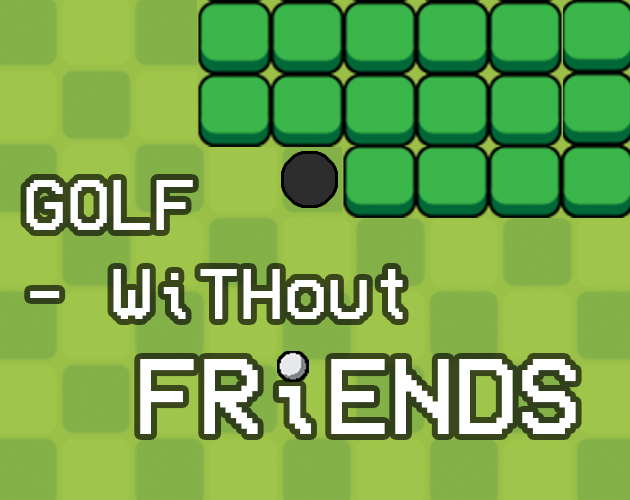
<style>
.page{position:relative;width:630px;height:500px}
.page>*{position:absolute;margin:0}
.t1{font:74.1px "VCROSDMono";color:#ffffff}
.t2{font:108.6px "VCROSDMono";color:#ffffff}
</style>
<div class="page">
<p class="t1" style="left:26px;top:180px;width:377px;height:139px">GOLF <br>- WiTHout</p>
<p class="t2" style="left:140px;top:359px;width:436px;height:75px">FRiENDS</p>
</div>
